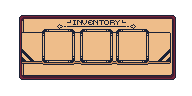
<style>
.page{position:relative;width:192px;height:96px;background:#ffffff}
.page>*{position:absolute;margin:0}
.t1{font:12.5px "ZF#2ndPixelus";color:#1b2236}
</style>
<div class="page">
<p class="t1" style="left:73px;top:20px;width:47px;height:5px">Inventory</p>
</div>
